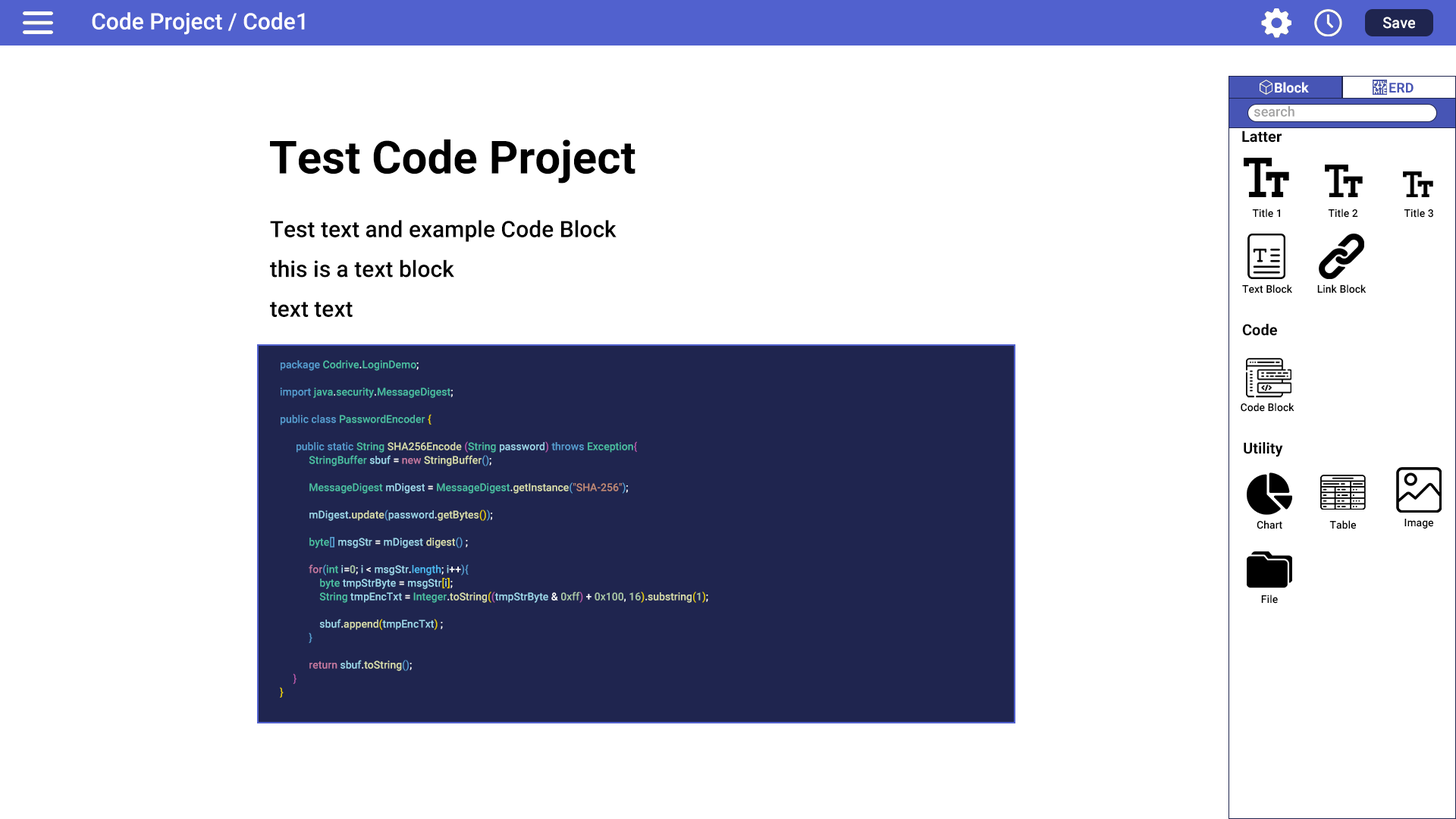
<style>
.page{position:relative;width:1456px;height:819px;background:#ffffff}
.page>*{position:absolute;margin:0}
.t1{font:22.7px "Roboto-Medium";color:#ffffff}
.t2{font:15.2px "Roboto-Medium";color:#ffffff}
.t3{font:13.6px "Roboto-Bold";color:#ffffff}
.t4{font:13.6px "Roboto-Bold";color:#4755b5}
.t5{font:13.6px "Roboto-Medium";color:#a3a3a3}
.t6{font:15.2px "Roboto-Bold";color:#000000}
.t7{font:45.5px "Roboto-Bold";color:#000000}
.t8{font:10.6px "Roboto-Medium";color:#000000}
.t9{font:22.7px "Roboto-Medium";color:#000000}
.t10{font:10.6px/13.6px "Roboto-Medium";color:#4bbea1}
.t11{font:10.6px/13.6px "Roboto-Medium";color:#569cd0}
.t12{font:10.6px/13.6px "Roboto-Medium";color:#ffffff}
.t13{font:10.6px/13.6px "Roboto-Medium";color:#e8cd03}
.t14{font:10.6px/13.6px "Roboto-Medium";color:#d7dcab}
.t15{font:10.6px/13.6px "Roboto-Medium";color:#b358a8}
.t16{font:10.6px/13.6px "Roboto-Medium";color:#9cd6e9}
.t17{font:10.6px/13.6px "Roboto-Medium";color:#c2789f}
.t18{font:10.6px/13.6px "Roboto-Medium";color:#bf8975}
.t19{font:10.6px/13.6px "Roboto-Medium";color:#000000}
.t20{font:10.6px/13.6px "Roboto-Medium";color:#aac7a7}
.t21{font:10.6px/13.6px "Roboto-Medium";color:#4cb8f1}
.t22{font:10.6px/13.6px "Roboto-Medium";color:#fbfbfb}
</style>
<div class="page">
<p class="t1" style="left:92px;top:12px;width:213px;height:23px">Code Project / Code1</p>
<p class="t2" style="left:1383px;top:17px;width:32px;height:12px">Save</p>
<p class="t3" style="left:1275px;top:82px;width:34px;height:11px">Block</p>
<p class="t4" style="left:1389px;top:83px;width:25px;height:10px">ERD</p>
<p class="t5" style="left:1254px;top:106px;width:40px;height:11px">search</p>
<p class="t6" style="left:1242px;top:130px;width:40px;height:13px">Latter</p>
<p class="t7" style="left:270px;top:139px;width:365px;height:45px">Test Code Project</p>
<p class="t8" style="left:1252px;top:209px;width:28px;height:9px">Title 1</p>
<p class="t8" style="left:1328px;top:209px;width:30px;height:9px">Title 2</p>
<p class="t8" style="left:1404px;top:209px;width:29px;height:9px">Title 3</p>
<p class="t9" style="left:270px;top:220px;width:347px;height:97px">Test text and example Code Block<br>this is a text block<br>text text</p>
<p class="t8" style="left:1242px;top:284px;width:50px;height:9px">Text Block</p>
<p class="t8" style="left:1317px;top:284px;width:49px;height:9px">Link Block</p>
<p class="t6" style="left:1242px;top:324px;width:35px;height:12px">Code</p>
<p class="t10" style="left:280px;top:360px;width:428px;height:338px"><span class="t11">package </span>Codrive<span class="t12">.</span>LoginDemo<span class="t12">;<br><br></span><span class="t11">import </span>java<span class="t12">.</span>security<span class="t12">.</span>MessageDigest<span class="t12">;<br><br></span><span class="t11">public class </span>PasswordEncoder <span class="t13">{<br><br>      </span><span class="t11">public static </span>String <span class="t14">SHA256Encode </span><span class="t15">(</span>String <span class="t16">password</span><span class="t15">) </span><span class="t11">throws </span>Exception<span class="t15">{<br>           </span>StringBuffer <span class="t16">sbuf </span><span class="t12">= </span><span class="t17">new </span><span class="t14">StringBuffer</span><span class="t11">()</span><span class="t12">;<br><br>           </span>MessageDigest <span class="t16">mDigest </span><span class="t12">= </span>MessageDigest<span class="t12">.</span><span class="t14">getInstance</span><span class="t11">(</span><span class="t18">"SHA-256"</span><span class="t11">)</span><span class="t12">;<br><br>           </span><span class="t16">mDigest</span><span class="t12">.</span><span class="t14">update</span><span class="t11">(</span><span class="t16">password</span><span class="t12">.</span><span class="t14">getBytes</span><span class="t13">()</span><span class="t11">)</span><span class="t12">;<br><br>           </span>byte<span class="t11">[] </span><span class="t16">msgStr </span><span class="t12">= </span><span class="t16">mDigest</span><span class="t19">.</span><span class="t14">digest</span><span class="t11">() </span><span class="t12">;<br><br>           </span><span class="t17">for</span><span class="t11">(</span>int <span class="t16">i</span><span class="t12">=</span><span class="t20">0</span><span class="t12">; </span><span class="t16">i </span><span class="t12">&lt; </span><span class="t16">msgStr</span><span class="t12">.</span><span class="t21">length</span><span class="t12">; </span><span class="t16">i</span><span class="t12">++</span><span class="t11">){<br>               </span>byte <span class="t16">tmpStrByte </span><span class="t12">= </span><span class="t16">msgStr</span><span class="t13">[</span><span class="t16">i</span><span class="t13">]</span><span class="t12">;<br>               </span>String <span class="t16">tmpEncTxt </span><span class="t12">= </span>Integer<span class="t22">.</span><span class="t14">toString</span><span class="t13">(</span><span class="t15">(</span><span class="t16">tmpStrByte </span><span class="t12">&amp; </span><span class="t20">0xff</span><span class="t15">) </span><span class="t12">+ </span><span class="t20">0x100</span><span class="t12">, </span><span class="t20">16</span><span class="t13">)</span><span class="t12">.</span><span class="t14">substring</span><span class="t13">(</span><span class="t20">1</span><span class="t13">)</span><span class="t12">;<br><br>               </span><span class="t16">sbuf</span><span class="t12">.</span><span class="t14">append</span><span class="t13">(</span><span class="t16">tmpEncTxt</span><span class="t13">) </span><span class="t12">;<br>           </span><span class="t11">}<br><br>           </span><span class="t17">return </span><span class="t16">sbuf</span><span class="t12">.</span><span class="t14">toString</span><span class="t11">()</span><span class="t12">;<br></span><span class="t15">     }<br></span><span class="t13">}</span></p>
<p class="t8" style="left:1241px;top:403px;width:53px;height:9px">Code Block</p>
<p class="t6" style="left:1244px;top:442px;width:39px;height:15px">Utility</p>
<p class="t8" style="left:1257px;top:520px;width:25px;height:9px">Chart</p>
<p class="t8" style="left:1329px;top:520px;width:27px;height:9px">Table</p>
<p class="t8" style="left:1404px;top:519px;width:29px;height:10px">Image</p>
<p class="t8" style="left:1261px;top:595px;width:17px;height:9px">File</p>
</div>
